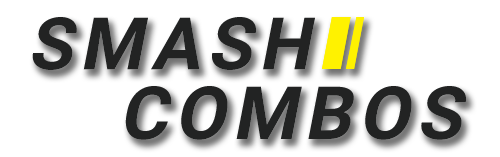
<style>
.page{position:relative;width:500px;height:157px;background:#ffffff}
.page>*{position:absolute;margin:0}
.t1{font:72.4px "Roboto-Bold";letter-spacing:0.1em;color:#222323;text-transform:uppercase;font-style:italic}
.t2{font:73.5px "Roboto-Bold";letter-spacing:0.1em;color:#222323;text-transform:uppercase;font-style:italic}
</style>
<div class="page">
<p class="t1" style="left:32px;top:17px;width:283px;height:53px">SMASH</p>
<p class="t1" style="left:32px;top:17px;width:283px;height:53px">SMASH</p>
<p class="t2" style="left:125px;top:86px;width:341px;height:54px">COMBOS</p>
<p class="t2" style="left:125px;top:86px;width:341px;height:54px">COMBOS</p>
</div>
